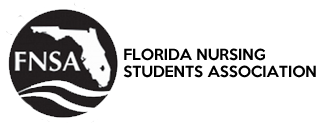
<style>
.page{position:relative;width:320px;height:130px;background:#ffffff}
.page>*{position:absolute;margin:0}
.t1{font:14px "KeepCalm-Medium";color:#000000}
</style>
<div class="page">
<p class="t1" style="left:123px;top:48px;width:193px;height:30px">FLORIDA NURSING<br>STUDENTS ASSOCIATION</p>
</div>
